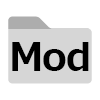
<style>
.page{position:relative;width:100px;height:100px;background:#ffffff}
.page>*{position:absolute;margin:0}
.t1{font:37.5px "Meiryo-Bold";letter-spacing:-0.02em;color:#000000}
</style>
<div class="page">
<p class="t1" style="left:12px;top:42px;width:77px;height:29px">Mod</p>
</div>
